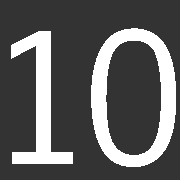
<style>
.page{position:relative;width:180px;height:180px;background:#333333}
.page>*{position:absolute;margin:0}
.t1{font:174px "EuphemiaUCAS";color:#ffffff}
</style>
<div class="page">
<p class="t1" style="left:91px;top:28px;width:85px;height:139px">0</p>
<p class="t1" style="left:11px;top:31px;width:62px;height:133px">1</p>
</div>
